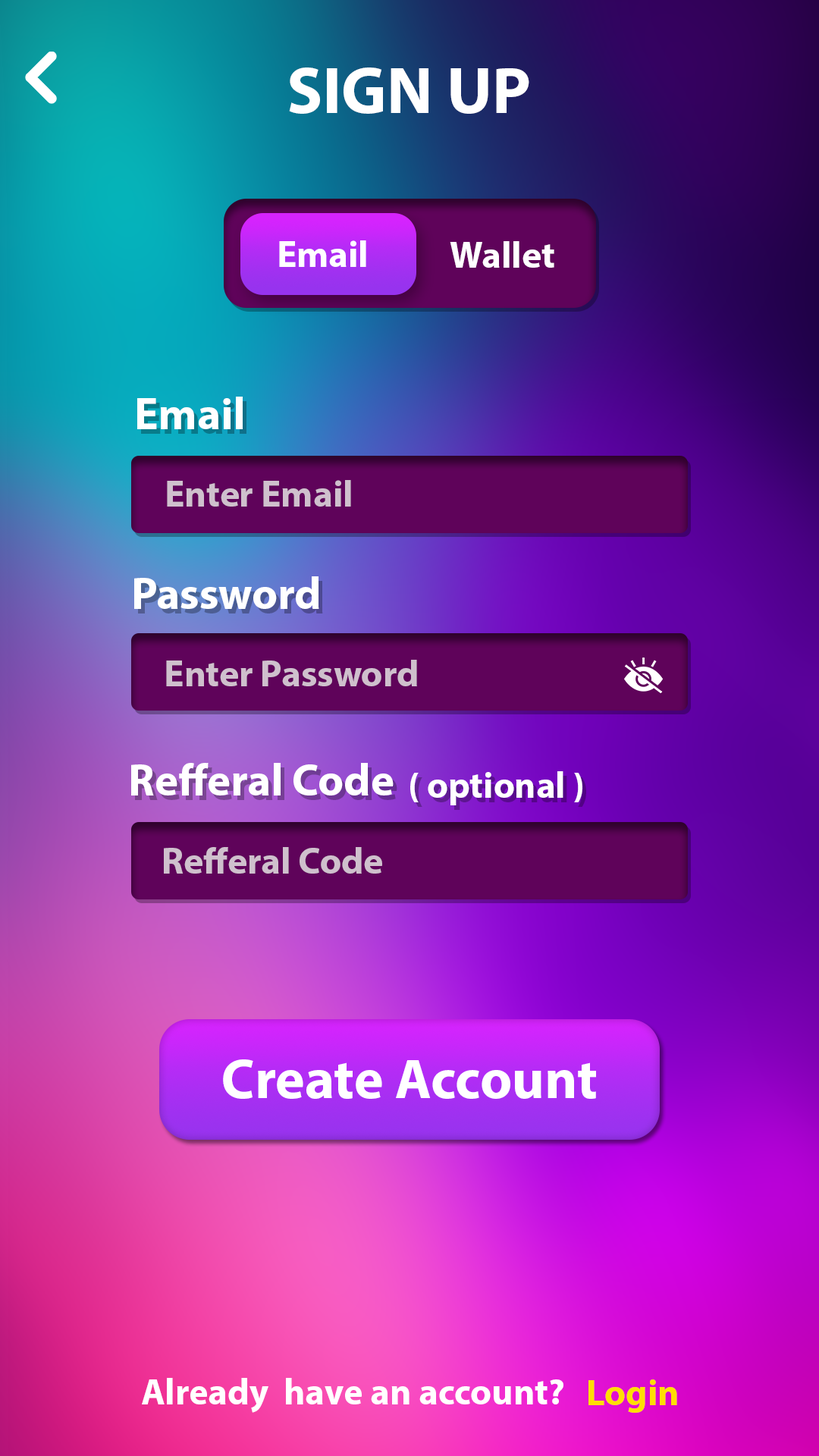
<style>
.page{position:relative;width:819px;height:1456px}
.page>*{position:absolute;margin:0}
.t1{font:66.8px "MyriadPro-Bold";color:#ffffff}
.t2{font:37.3px "MyriadPro-Bold";color:#ffffff}
.t3{font:44.8px "MyriadPro-Bold";color:#ffffff}
.t4{font:37.3px "MyriadPro-Bold";color:#cfc0cd}
.t5{font:36.7px "MyriadPro-Bold";color:#ffffff}
.t6{font:55.9px "MyriadPro-Bold";color:#ffffff}
.t7{font:36.8px "MyriadPro-Bold";color:#ffffff}
.t8{font:36.8px "MyriadPro-Bold";color:#ffde01}
</style>
<div class="page">
<p class="t1" style="left:289px;top:67px;width:240px;height:47px">SIGN UP</p>
<p class="t2" style="left:279px;top:240px;width:87px;height:27px">Email</p>
<p class="t2" style="left:450px;top:241px;width:104px;height:27px">Wallet</p>
<p class="t3" style="left:137px;top:397px;width:106px;height:32px">Email</p>
<p class="t4" style="left:167px;top:480px;width:184px;height:27px">Enter Email</p>
<p class="t3" style="left:134px;top:576px;width:185px;height:33px">Password</p>
<p class="t4" style="left:166px;top:660px;width:251px;height:26px">Enter Password</p>
<p class="t3" style="left:131px;top:763px;width:263px;height:32px">Refferal Code</p>
<p class="t5" style="left:410px;top:771px;width:172px;height:34px">( optional )</p>
<p class="t4" style="left:164px;top:847px;width:218px;height:27px">Refferal Code</p>
<p class="t6" style="left:223px;top:1059px;width:373px;height:40px">Create Account</p>
<p class="t7" style="left:142px;top:1378px;width:421px;height:35px">Already  have an account?</p>
<p class="t8" style="left:588px;top:1379px;width:89px;height:34px">Login</p>
</div>
